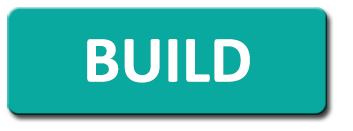
<style>
.page{position:relative;width:353px;height:131px;background:#09a9a0}
.page>*{position:absolute;margin:0}
.t1{font:66.9px "Calibri-Bold";color:#ffffff}
</style>
<div class="page">
<p class="t1" style="left:87px;top:39px;width:163px;height:44px">BUILD</p>
</div>
